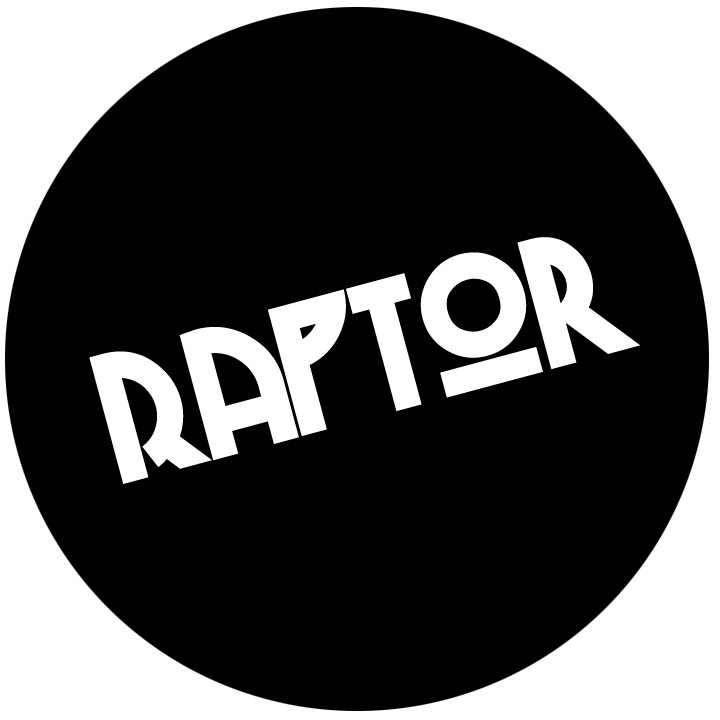
<style>
.page{position:relative;width:720px;height:720px;background:#000000}
.page>*{position:absolute;margin:0}
.t1{font:180px "Chi-Town";color:#ffffff}
</style>
<div class="page">
<p class="t1" style="left:89px;top:237px;width:551px;height:247px;rotate:-15deg">Raptor</p>
</div>
